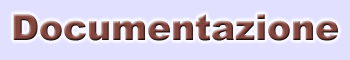
<style>
.page{position:relative;width:350px;height:60px;background:#e1e1ff}
.page>*{position:absolute;margin:0}
.t1{font:36px "Arial-Black"}
</style>
<div class="page">
<p class="t1" style="left:13px;top:14px;width:325px;height:27px">Documentazione</p>
</div>
